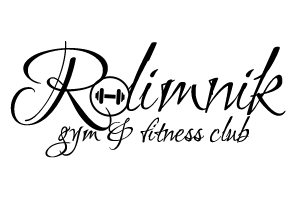
<style>
.page{position:relative;width:300px;height:200px;background:#ffffff}
.page>*{position:absolute;margin:0}
.t1{font:100px "Ruthie-Regular";color:#000000}
.t2{font:36px "Ruthie-Regular";color:#000000}
</style>
<div class="page">
<p class="t1" style="left:10px;top:41px;width:276px;height:90px">R limnik</p>
<p class="t2" style="left:45px;top:116px;width:205px;height:42px">gym &amp; fitness club</p>
</div>
